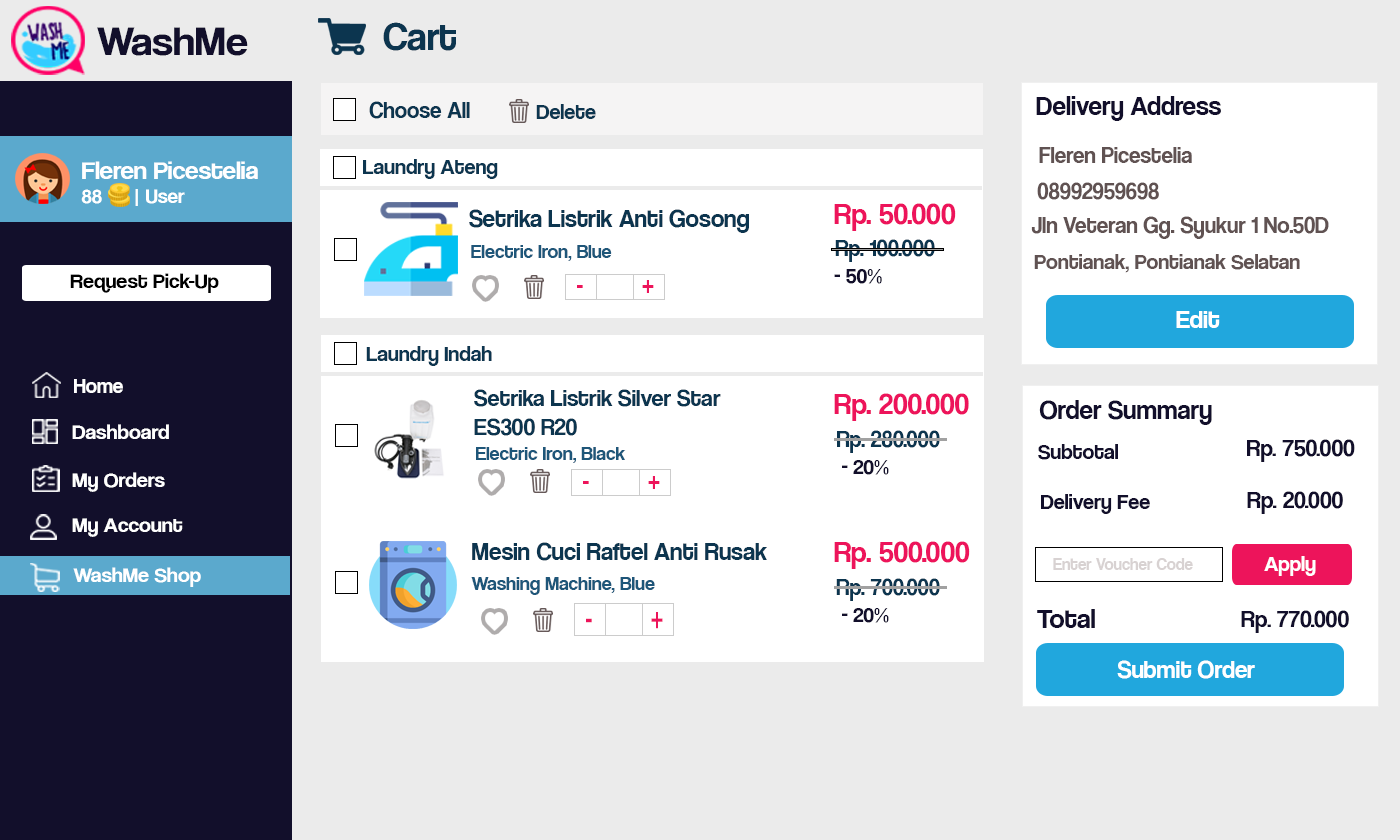
<style>
.page{position:relative;width:1400px;height:840px;background:#ffffff}
.page>*{position:absolute;margin:0}
.t1{font:42.1px "CoolveticaRg-Regular";color:#120f2b;scale:1.05 1}
.t2{font:40.4px "CoolveticaRg-Regular";color:#0c354f}
.t3{font:23px "CoolveticaRg-Regular";color:#0c354f}
.t4{font:27px "CoolveticaRg-Regular";color:#120f2b}
.t5{font:22px "CoolveticaRg-Regular";color:#0c354f}
.t6{font:23px "CoolveticaRg-Regular";color:#605252}
.t7{font:25.2px "CoolveticaRg-Regular";color:#ffffff;scale:1.05 1}
.t8{font:20px "CoolveticaRg-Regular";color:#ffffff;scale:1.05 1}
.t9{font:25px "CoolveticaRg-Regular";color:#0c354f}
.t10{font:30.2px "CoolveticaRg-Regular";color:#ed145b}
.t11{font:20px "CoolveticaRg-Regular";color:#1e5679}
.t12{font:23.1px "CoolveticaRg-Regular";color:#0c354f}
.t13{font:22px "CoolveticaRg-Regular";color:#605252}
.t14{font:22.1px "CoolveticaRg-Regular";color:#120f2b}
.t15{font:21px "CoolveticaRg-Regular";color:#000000;scale:1.05 1}
.t16{font:26.6px "CoolveticaRg-Regular";color:#ed145b;scale:0.88 1}
.t17{font:26px "CoolveticaRg-Regular";color:#ffffff}
.t18{font:21px "CoolveticaRg-Regular";color:#ffffff}
.t19{font:24px "CoolveticaRg-Regular";color:#0c354f}
.t20{font:30px "CoolveticaRg-Regular";color:#ed145b}
.t21{font:21px "CoolveticaRg-Regular";color:#ffffff;scale:1.05 1}
.t22{font:22px "CoolveticaRg-Regular";color:#120f2b}
.t23{font:24px "CoolveticaRg-Regular";color:#120f2b}
.t24{font:27.4px "CoolveticaRg-Regular";color:#ed145b;scale:0.85 1}
.t25{font:16.9px "CoolveticaRg-Regular";color:#d8d2d2}
.t26{font:22px "CoolveticaRg-Regular";color:#ffffff}
.t27{font:34.5px "CoolveticaRg-Regular";color:#ed145b;scale:0.68 1}
.t28{font:28px "CoolveticaRg-Regular";color:#120f2b}
.t29{font:25px "CoolveticaRg-Regular";color:#ffffff}
</style>
<div class="page">
<p class="t1" style="left:97px;top:27px;width:151px;height:29px">WashMe</p>
<p class="t2" style="left:383px;top:22px;width:73px;height:29px">Cart</p>
<p class="t3" style="left:369px;top:101px;width:101px;height:18px">Choose All</p>
<p class="t4" style="left:1036px;top:96px;width:185px;height:25px">Delivery Address</p>
<p class="t5" style="left:536px;top:104px;width:60px;height:15px">Delete</p>
<p class="t6" style="left:1039px;top:147px;width:153px;height:16px">Fleren Picestelia</p>
<p class="t7" style="left:81px;top:161px;width:177px;height:45px">Fleren Picestelia<br><span class="t8">88      | User</span></p>
<p class="t5" style="left:363px;top:159px;width:135px;height:20px">Laundry Ateng</p>
<p class="t6" style="left:1037px;top:182px;width:122px;height:18px">08992959698</p>
<p class="t9" style="left:469px;top:209px;width:280px;height:24px">Setrika Listrik Anti Gosong</p>
<p class="t10" style="left:834px;top:203px;width:122px;height:28px">Rp. 50.000</p>
<p class="t6" style="left:1031px;top:216px;width:298px;height:23px">Jln Veteran Gg. Syukur 1 No.50D</p>
<p class="t11" style="left:471px;top:245px;width:141px;height:16px">Electric Iron, Blue</p>
<p class="t12" style="left:835px;top:239px;width:100px;height:23px">Rp. 100.000</p>
<p class="t13" style="left:1034px;top:254px;width:266px;height:19px">Pontianak, Pontianak Selatan</p>
<p class="t14" style="left:834px;top:269px;width:48px;height:15px">- 50%</p>
<p class="t15" style="left:70px;top:273px;width:149px;height:20px">Request Pick-Up</p>
<p class="t16" style="left:642px;top:280px;width:12px;height:13px">+</p>
<p class="t16" style="left:577px;top:285px;width:6px;height:3px">-</p>
<p class="t17" style="left:1176px;top:311px;width:44px;height:17px">Edit</p>
<p class="t5" style="left:366px;top:346px;width:126px;height:20px">Laundry Indah</p>
<p class="t18" style="left:74px;top:379px;width:49px;height:14px">Home</p>
<p class="t19" style="left:474px;top:389px;width:247px;height:47px">Setrika Listrik Silver Star <br>ES300 R20</p>
<p class="t20" style="left:834px;top:393px;width:135px;height:28px">Rp. 200.000</p>
<p class="t4" style="left:1039px;top:400px;width:173px;height:25px">Order Summary</p>
<p class="t21" style="left:72px;top:424px;width:97px;height:15px">Dashboard</p>
<p class="t3" style="left:837px;top:430px;width:103px;height:23px">Rp. 280.000</p>
<p class="t11" style="left:476px;top:447px;width:150px;height:16px">Electric Iron, Black</p>
<p class="t22" style="left:1038px;top:444px;width:80px;height:16px">Subtotal</p>
<p class="t23" style="left:1247px;top:439px;width:108px;height:23px">Rp. 750.000</p>
<p class="t22" style="left:842px;top:460px;width:47px;height:15px">- 20%</p>
<p class="t21" style="left:72px;top:472px;width:93px;height:20px">My Orders</p>
<p class="t24" style="left:583px;top:481px;width:6px;height:3px">-</p>
<p class="t24" style="left:648px;top:476px;width:12px;height:13px">+</p>
<p class="t22" style="left:1041px;top:494px;width:109px;height:20px">Delivery Fee</p>
<p class="t23" style="left:1247px;top:491px;width:96px;height:23px">Rp. 20.000</p>
<p class="t21" style="left:72px;top:518px;width:111px;height:19px">My Account</p>
<p class="t9" style="left:472px;top:542px;width:295px;height:19px">Mesin Cuci Raftel Anti Rusak</p>
<p class="t20" style="left:834px;top:541px;width:136px;height:28px">Rp. 500.000</p>
<p class="t25" style="left:1053px;top:558px;width:140px;height:12px">Enter Voucher Code</p>
<p class="t26" style="left:1264px;top:556px;width:52px;height:20px">Apply</p>
<p class="t21" style="left:73px;top:567px;width:128px;height:20px">WashMe Shop</p>
<p class="t11" style="left:471px;top:577px;width:184px;height:18px">Washing Machine, Blue</p>
<p class="t3" style="left:836px;top:578px;width:104px;height:23px">Rp. 700.000</p>
<p class="t27" style="left:651px;top:612px;width:12px;height:17px">+</p>
<p class="t22" style="left:842px;top:608px;width:47px;height:15px">- 20%</p>
<p class="t28" style="left:1037px;top:609px;width:58px;height:19px">Total</p>
<p class="t23" style="left:1241px;top:610px;width:108px;height:23px">Rp. 770.000</p>
<p class="t27" style="left:586px;top:618px;width:6px;height:5px">-</p>
<p class="t29" style="left:1117px;top:660px;width:138px;height:19px">Submit Order</p>
</div>
